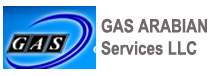
<style>
.page{position:relative;width:211px;height:76px;background:#ffffff}
.page>*{position:absolute;margin:0}
.t1{font:18.5px "Arial-BoldMT";color:#706969;scale:0.82 1}
</style>
<div class="page">
<p class="t1" style="left:101px;top:18px;width:106px;height:37px">GAS ARABIAN <br>Services LLC</p>
</div>
